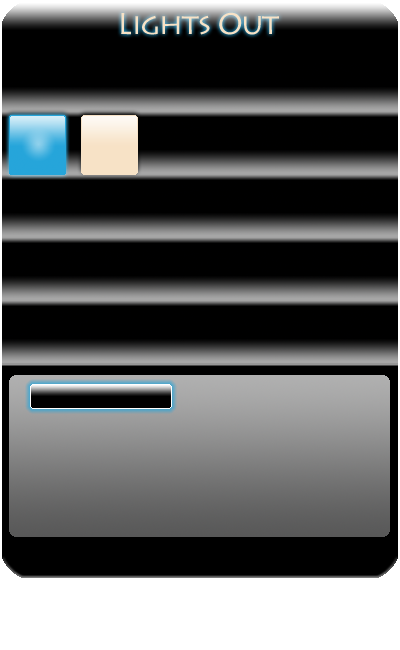
<style>
.page{position:relative;width:400px;height:650px;background:#000000}
.page>*{position:absolute;margin:0}
.t1{font:30px "LithosPro-Regular";letter-spacing:-0.05em;color:#f7e2c6}
</style>
<div class="page">
<p class="t1" style="left:121px;top:12px;width:158px;height:23px">Lights Out</p>
</div>
